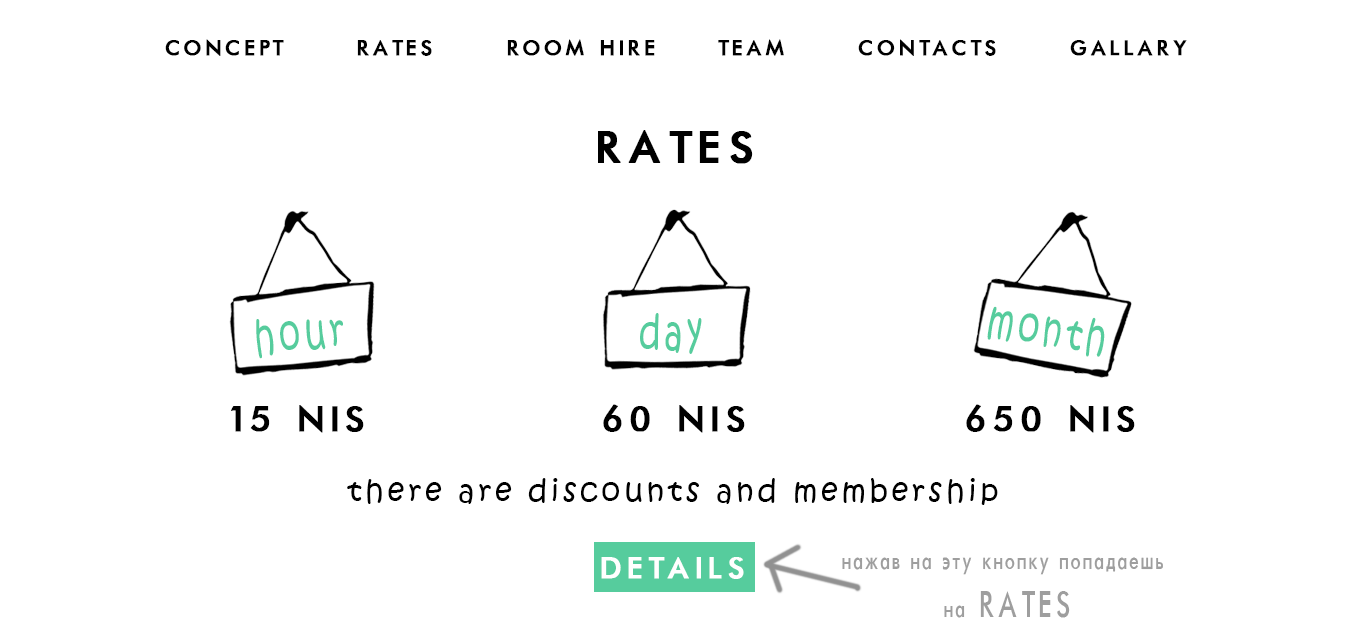
<style>
.page{position:relative;width:1351px;height:638px;background:#ffffff}
.page>*{position:absolute;margin:0}
.t1{font:24px "Futura-Normal";letter-spacing:0.12em;color:#000000;text-transform:uppercase;font-weight:bold}
.t2{font:50px "Futura-Normal";letter-spacing:0.12em;color:#000000;text-transform:uppercase;font-weight:bold}
.t3{font:47.1px "KristenITC-Regular";letter-spacing:0.12em;color:#56cc9d;scale:0.71 1}
.t4{font:47px "KristenITC-Regular";letter-spacing:0.12em;color:#56cc9d;scale:0.71 1}
.t5{font:47.2px "KristenITC-Regular";letter-spacing:0.12em;color:#56cc9d;scale:0.71 1}
.t6{font:40px "Futura-Normal";letter-spacing:0.12em;color:#000000;text-transform:uppercase;font-weight:bold}
.t7{font:30px "KristenITC-Regular";letter-spacing:0.12em;color:#000000}
.t8{font:34px "Futura-Normal";letter-spacing:0.12em;color:#ffffff;text-transform:uppercase;font-weight:bold}
.t9{font:28px/48px "Futura-Normal";letter-spacing:0.08em;color:#9e9e9e;scale:0.71 1}
.t10{font:42px/48px "Futura-Normal";letter-spacing:0.12em;color:#9e9e9e;text-transform:uppercase;scale:0.71 1}
</style>
<div class="page">
<p class="t1" style="left:165px;top:39px;width:1022px;height:17px">concept      rates      room hire     team      contacts      gallary</p>
<p class="t2" style="left:598px;top:130px;width:155px;height:34px">rates</p>
<p class="t3" style="left:640px;top:313px;width:62px;height:41px">day</p>
<p class="t4" style="left:987px;top:306px;width:118px;height:51px;rotate:9deg">month</p>
<p class="t5" style="left:256px;top:319px;width:87px;height:40px;rotate:-6deg">hour</p>
<p class="t6" style="left:231px;top:405px;width:133px;height:28px">15 NIS</p>
<p class="t6" style="left:603px;top:404px;width:142px;height:29px">60 NIS</p>
<p class="t6" style="left:966px;top:404px;width:169px;height:29px">650 NIS</p>
<p class="t7" style="left:347px;top:478px;width:651px;height:27px">there are discounts and membership</p>
<p class="t8" style="left:601px;top:557px;width:143px;height:22px">details</p>
<p class="t9" style="left:842px;top:557px;width:321px;height:61px;text-align:center">нажав на эту кнопку попадаешь <br>на <span class="t10">rates</span></p>
</div>
